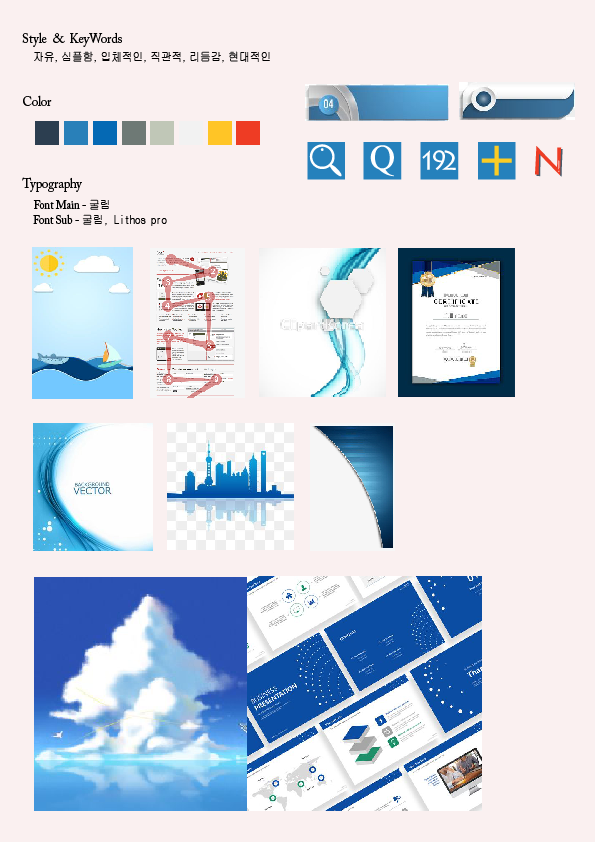
<style>
.page{position:relative;width:595px;height:842px;background:#faf0f0}
.page>*{position:absolute;margin:0}
.t1{font:14px "ACaslonPro-Regular";letter-spacing:-0.01em;color:#000000;scale:0.9 1}
.t2{font:12px "Gulim";letter-spacing:-0.01em;color:#000000;scale:0.9 1}
.t3{font:12px "ACaslonPro-Regular";letter-spacing:-0.01em;color:#000000;scale:0.9 1}
.t4{font:12px "GulimChe";letter-spacing:-0.01em;color:#000000;scale:0.9 1}
</style>
<div class="page">
<p class="t1" style="left:22px;top:32px;width:100px;height:15px">Style  &amp;  KeyWords</p>
<p class="t2" style="left:34px;top:51px;width:236px;height:12px">자유, 심플함, 입체적인, 직관적, 리듬감, 현대적인</p>
<p class="t1" style="left:23px;top:95px;width:29px;height:11px">Color</p>
<p class="t1" style="left:22px;top:177px;width:60px;height:15px">Typography</p>
<p class="t3" style="left:33px;top:199px;width:76px;height:11px">Font Main - <span class="t4">굴림</span></p>
<p class="t4" style="left:33px;top:214px;width:134px;height:12px"><span class="t3">Font Sub - </span>굴림, Lithos pro</p>
</div>
